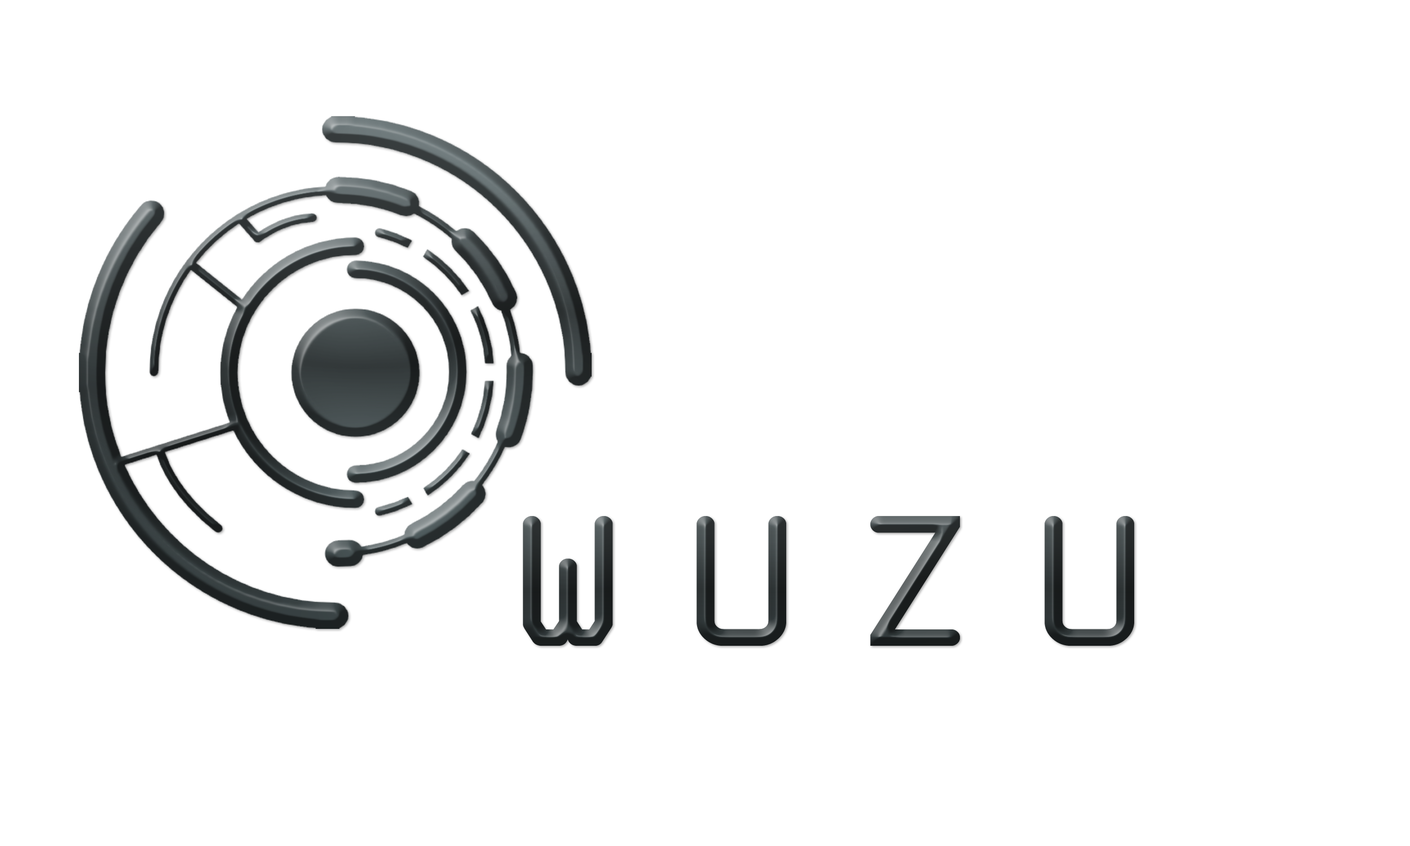
<style>
.page{position:relative;width:1410px;height:846px;background:#ffffff}
.page>*{position:absolute;margin:0}
.t1{font:199.9px "OCRAExtended";letter-spacing:0.2em;text-transform:uppercase;scale:1.08 1}
</style>
<div class="page">
<p class="t1" style="left:523px;top:516px;width:611px;height:130px">wuzu</p>
</div>
